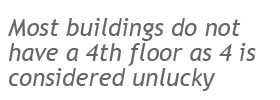
<style>
.page{position:relative;width:280px;height:100px;background:#ffffff}
.page>*{position:absolute;margin:0}
.t1{font:24px/25px "TrebuchetMS-Italic";color:#666666}
</style>
<div class="page">
<p class="t1" style="left:8px;top:18px;width:248px;height:73px">Most buildings do not <br>have a 4th floor as 4 is <br>considered unlucky</p>
</div>
